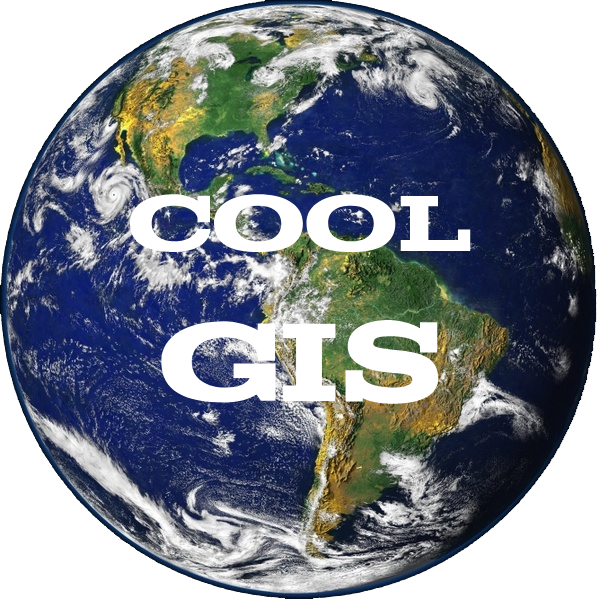
<style>
.page{position:relative;width:600px;height:599px;background:#ffffff}
.page>*{position:absolute;margin:0}
.t1{font:89px "Acknowledgement";color:#ffffff}
.t2{font:125px "Acknowledgement";color:#ffffff}
</style>
<div class="page">
<p class="t1" style="left:129px;top:194px;width:342px;height:210px;text-align:center">cool<br><span class="t2">GIS</span></p>
</div>
